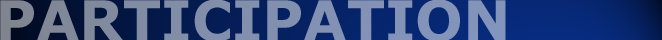
<style>
.page{position:relative;width:662px;height:40px}
.page>*{position:absolute;margin:0}
.t1{font:56px "Verdana-Bold";letter-spacing:-0.005em;color:#828fae}
</style>
<div class="page">
<p class="t1" style="left:0px;top:0px;width:506px;height:42px">PARTICIPATION</p>
</div>
